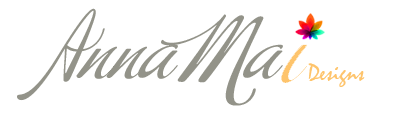
<style>
.page{position:relative;width:400px;height:117px;background:#ffffff}
.page>*{position:absolute;margin:0}
.t1{font:72px "BuffetScript";color:#939389}
.t2{font:24px "Mistral";color:#fec46c}
</style>
<div class="page">
<p class="t1" style="left:17px;top:8px;width:266px;height:98px">Anna Ma</p>
<p class="t2" style="left:308px;top:63px;width:57px;height:24px">Designs</p>
</div>
